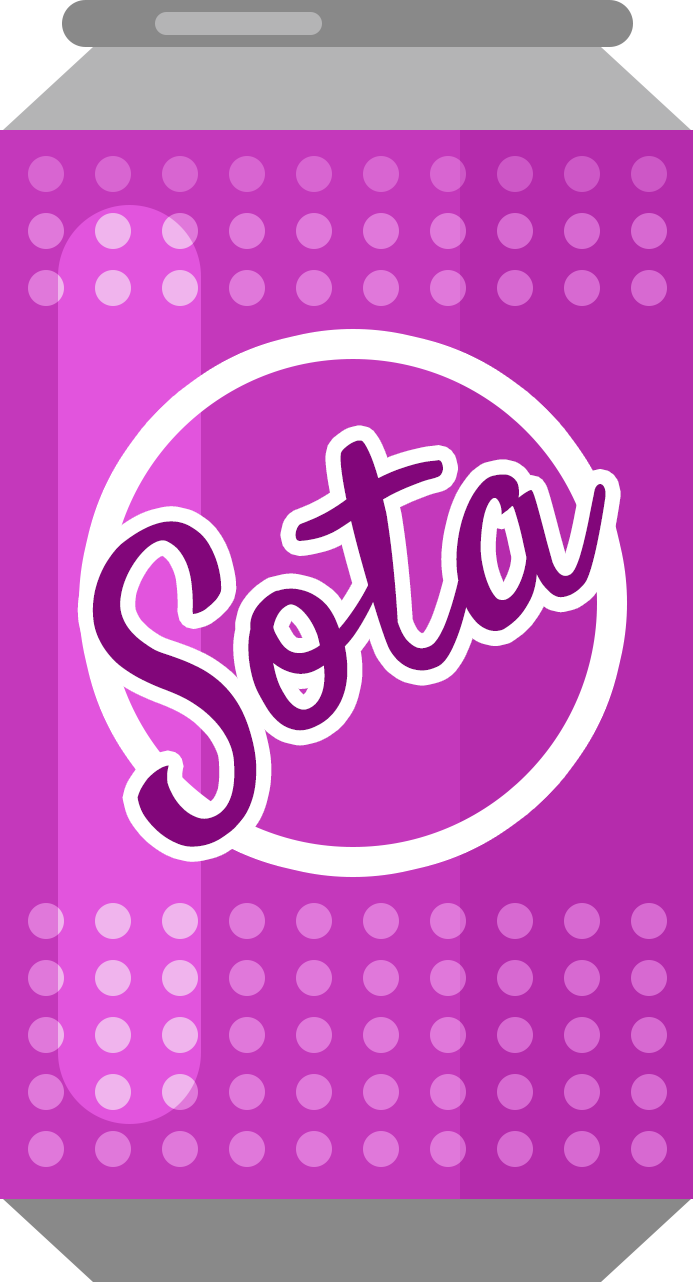
<style>
.page{position:relative;width:693px;height:1282px;background:#c438bb}
.page>*{position:absolute;margin:0}
.t1{font:333.3px "Satisfy-Regular";color:#82067a}
</style>
<div class="page">
<p class="t1" style="left:92px;top:440px;width:514px;height:407px;rotate:-27deg">Sota</p>
</div>
